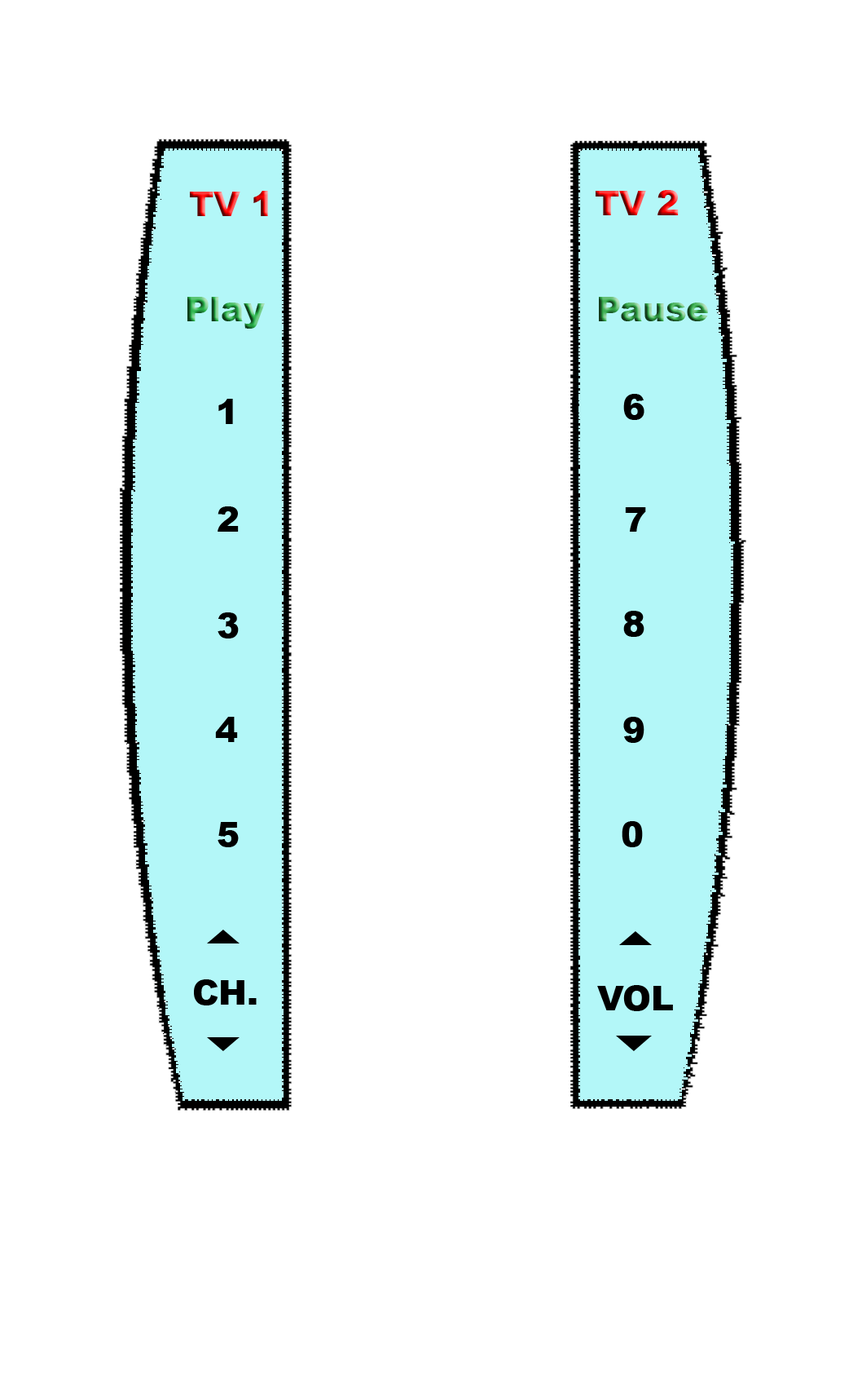
<style>
.page{position:relative;width:862px;height:1383px;background:#ffffff}
.page>*{position:absolute;margin:0}
.t1{font:34px "Arial-Black"}
.t2{font:34px "Arial-Black";color:#000000}
.t3{font:34px "CrestronTransport";color:#000000}
.t4{font:37.4px "CrestronTransport";color:#000000}
</style>
<div class="page">
<p class="t1" style="left:190px;top:191px;width:78px;height:25px">TV 1</p>
<p class="t1" style="left:596px;top:190px;width:83px;height:25px">TV 2</p>
<p class="t1" style="left:187px;top:297px;width:78px;height:32px">Play</p>
<p class="t1" style="left:599px;top:297px;width:109px;height:24px">Pause</p>
<p class="t2" style="left:218px;top:399px;width:15px;height:25px">1</p>
<p class="t2" style="left:624px;top:394px;width:21px;height:26px">6</p>
<p class="t2" style="left:218px;top:506px;width:21px;height:26px">2</p>
<p class="t2" style="left:625px;top:507px;width:21px;height:25px">7</p>
<p class="t2" style="left:218px;top:612px;width:21px;height:26px">3</p>
<p class="t2" style="left:624px;top:611px;width:21px;height:26px">8</p>
<p class="t2" style="left:215px;top:717px;width:23px;height:25px">4</p>
<p class="t2" style="left:624px;top:717px;width:21px;height:26px">9</p>
<p class="t2" style="left:218px;top:822px;width:21px;height:25px">5</p>
<p class="t2" style="left:622px;top:821px;width:21px;height:26px">0</p>
<p class="t3" style="left:207px;top:929px;width:33px;height:14px">K</p>
<p class="t3" style="left:620px;top:931px;width:32px;height:14px">K</p>
<p class="t2" style="left:194px;top:979px;width:63px;height:26px">CH.</p>
<p class="t2" style="left:598px;top:985px;width:75px;height:26px">VOL</p>
<p class="t3" style="left:207px;top:1037px;width:33px;height:14px">J</p>
<p class="t4" style="left:616px;top:1035px;width:36px;height:16px">J</p>
</div>
